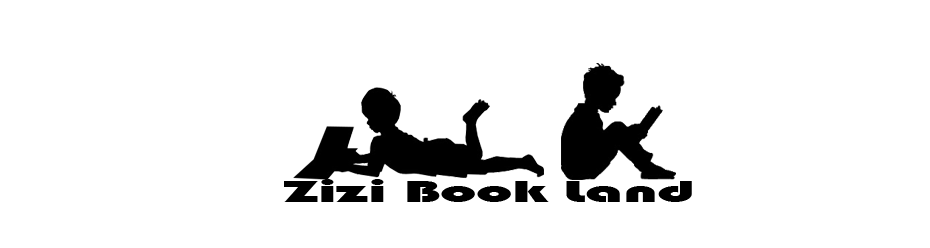
<style>
.page{position:relative;width:930px;height:248px;background:#ffffff}
.page>*{position:absolute;margin:0}
.t1{font:32.3px "Bauhaus93";color:#000000;scale:2 1}
</style>
<div class="page">
<p class="t1" style="left:284px;top:179px;width:408px;height:23px">Zizi Book Land</p>
</div>
